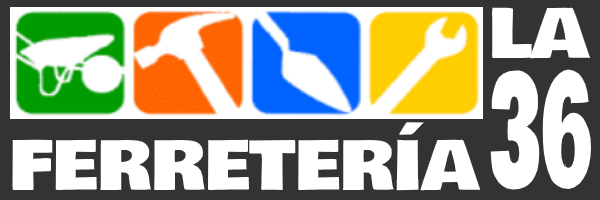
<style>
.page{position:relative;width:600px;height:200px;background:#ffffff}
.page>*{position:absolute;margin:0}
.t1{font:66.5px "BowlbyOne-Regular";color:#ffffff;scale:1.06 1}
.t2{font:149.9px "BowlbyOne-Regular";color:#ffffff;scale:0.48 1}
</style>
<div class="page">
<p class="t1" style="left:492px;top:7px;width:98px;height:52px">LA</p>
<p class="t2" style="left:490px;top:69px;width:101px;height:121px">36</p>
<p class="t1" style="left:12px;top:122px;width:469px;height:69px">FERRETERÍA</p>
</div>
